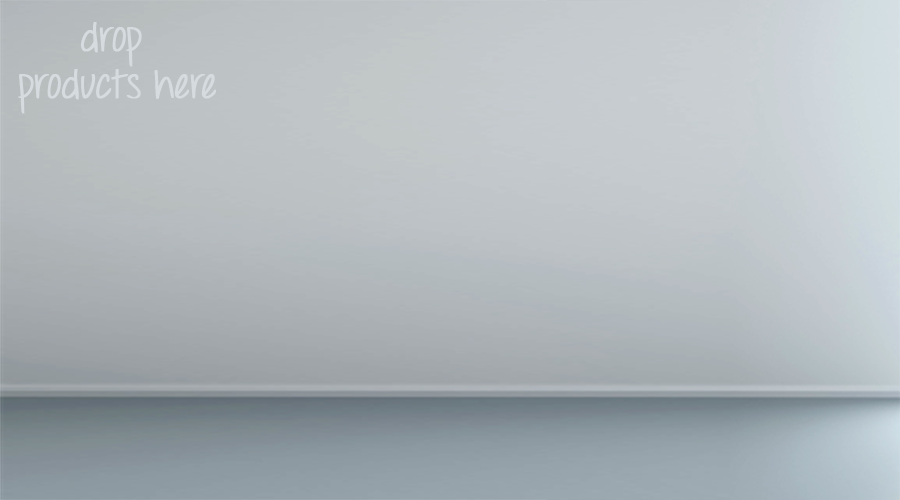
<style>
.page{position:relative;width:900px;height:500px}
.page>*{position:absolute;margin:0}
.t1{font:39.1px "ThrowMyHandsUpintheAir";color:#d5dbdf;font-weight:bold}
</style>
<div class="page">
<p class="t1" style="left:18px;top:22px;width:198px;height:92px;text-align:center">drop <br>products here</p>
</div>
